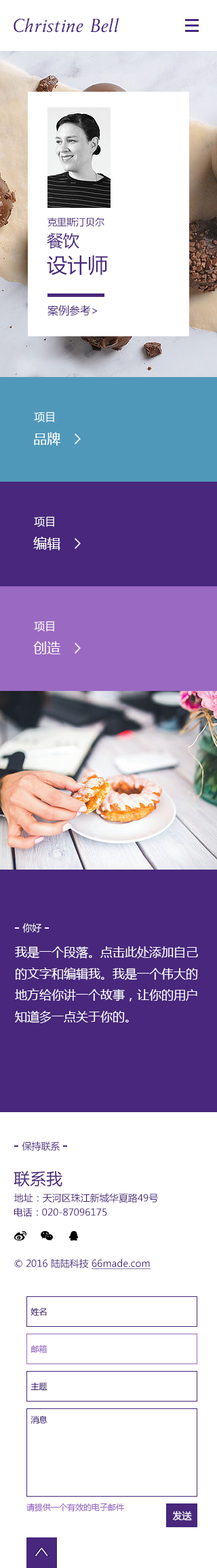
<style>
.page{position:relative;width:217px;height:1568px;background:#ffffff}
.page>*{position:absolute;margin:0}
.t1{font:20.4px "Anziano-Italic";color:#48277c}
.t2{font:9.5px "MicrosoftYaHei";color:#48277c}
.t3{font:16.3px "MicrosoftYaHei";color:#48277c}
.t4{font:20.4px "MicrosoftYaHei";color:#48277c}
.t5{font:10.9px "MicrosoftYaHei";color:#48277c}
.t6{font:10.9px "MicrosoftYaHei";color:#fefefe}
.t7{font:13.6px "MicrosoftYaHei";color:#ffffff}
.t8{font:9.5px "MicrosoftYaHei";color:#ffffff}
.t9{font:12.2px "MicrosoftYaHei";color:#ffffff}
.t10{font:9.5px "MicrosoftYaHei";color:#48277c;text-decoration:underline}
.t11{font:8.2px "MicrosoftYaHei";color:#48277c}
.t12{font:8.2px "MicrosoftYaHei";color:#9a69c2}
</style>
<div class="page">
<p class="t1" style="left:14px;top:18px;width:106px;height:15px">Christine Bell</p>
<p class="t2" style="left:48px;top:217px;width:57px;height:10px">克里斯汀贝尔</p>
<p class="t3" style="left:47px;top:232px;width:32px;height:17px">餐饮</p>
<p class="t4" style="left:47px;top:255px;width:61px;height:20px">设计师</p>
<p class="t5" style="left:48px;top:305px;width:50px;height:11px">案例参考&gt;</p>
<p class="t6" style="left:34px;top:412px;width:20px;height:11px">项目</p>
<p class="t7" style="left:34px;top:432px;width:27px;height:14px">品牌</p>
<p class="t6" style="left:34px;top:516px;width:20px;height:11px">项目</p>
<p class="t7" style="left:33px;top:537px;width:27px;height:13px">编辑</p>
<p class="t6" style="left:34px;top:621px;width:20px;height:11px">项目</p>
<p class="t7" style="left:33px;top:641px;width:27px;height:13px">创造</p>
<p class="t8" style="left:22px;top:923px;width:19px;height:10px">你好</p>
<p class="t9" style="left:15px;top:946px;width:183px;height:77px">我是一个段落。点击此处添加自己的文字和编辑我。我是一个伟大的地方给你讲一个故事，让你的用户知道多一点关于你的。</p>
<p class="t2" style="left:22px;top:1141px;width:38px;height:10px">保持联系</p>
<p class="t3" style="left:14px;top:1171px;width:49px;height:16px">联系我</p>
<p class="t2" style="left:14px;top:1193px;width:145px;height:10px">地址：天河区珠江新城华夏路49号</p>
<p class="t2" style="left:14px;top:1207px;width:93px;height:10px">电话：020-87096175</p>
<p class="t2" style="left:14px;top:1259px;width:137px;height:10px">© 2016 陆陆科技 <span class="t10">66made.com</span></p>
<p class="t11" style="left:31px;top:1308px;width:16px;height:8px">姓名</p>
<p class="t12" style="left:31px;top:1344px;width:17px;height:9px">邮箱</p>
<p class="t11" style="left:31px;top:1383px;width:17px;height:8px">主题</p>
<p class="t11" style="left:31px;top:1415px;width:17px;height:9px">消息</p>
<p class="t12" style="left:26px;top:1503px;width:98px;height:9px">请提供一个有效的电子邮件</p>
<p class="t8" style="left:173px;top:1511px;width:19px;height:9px">发送</p>
</div>
